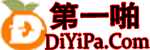
<style>
.page{position:relative;width:150px;height:50px;background:#ffffff}
.page>*{position:absolute;margin:0}
.t1{font:28px "SimHei";color:#000000;font-weight:bold;scale:1.06 1}
.t2{font:21px "Constantia";color:#000000;scale:0.95 1}
</style>
<div class="page">
<p class="t1" style="left:50px;top:2px;width:89px;height:28px;rotate:-1deg">第一啪</p>
<p class="t2" style="left:45px;top:33px;width:105px;height:17px">DiYiPa.Com</p>
</div>
